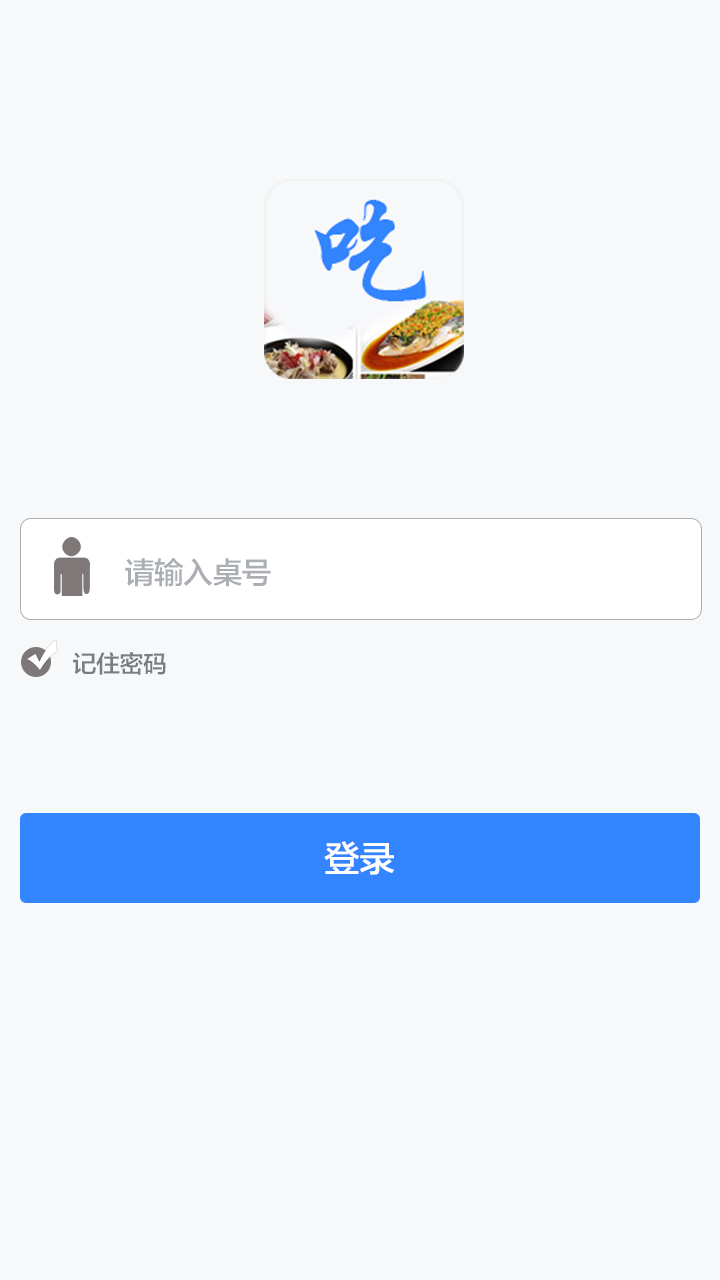
<style>
.page{position:relative;width:720px;height:1280px;background:#f7f8fa}
.page>*{position:absolute;margin:0}
.t1{font:30px "FZLTZHK--GBK1-0";letter-spacing:-0.025em;color:#abaeb3}
.t2{font:24px "FZLTZHK--GBK1-0";letter-spacing:-0.025em;color:#7a7c80}
.t3{font:36px "FZLTZHK--GBK1-0";letter-spacing:-0.025em;color:#ffffff}
</style>
<div class="page">
<p class="t1" style="left:125px;top:558px;width:146px;height:29px">请输入桌号</p>
<p class="t2" style="left:73px;top:652px;width:93px;height:23px">记住密码</p>
<p class="t3" style="left:324px;top:841px;width:70px;height:34px">登录</p>
</div>
